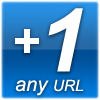
<style>
.page{position:relative;width:100px;height:100px}
.page>*{position:absolute;margin:0}
.t1{font:88px "Arial-BoldItalicMT";color:#ffffff}
.t2{font:49px "Arial-BoldMT";color:#ffffff}
.t3{font:20px "Arial-ItalicMT";color:#ffffff}
.t4{font:22px "Arial-ItalicMT";color:#ffffff;font-variant:small-caps}
</style>
<div class="page">
<p class="t1" style="left:48px;top:8px;width:35px;height:64px">1</p>
<p class="t2" style="left:15px;top:29px;width:24px;height:24px">+</p>
<p class="t3" style="left:15px;top:79px;width:69px;height:17px">any <span class="t4">url</span></p>
</div>
